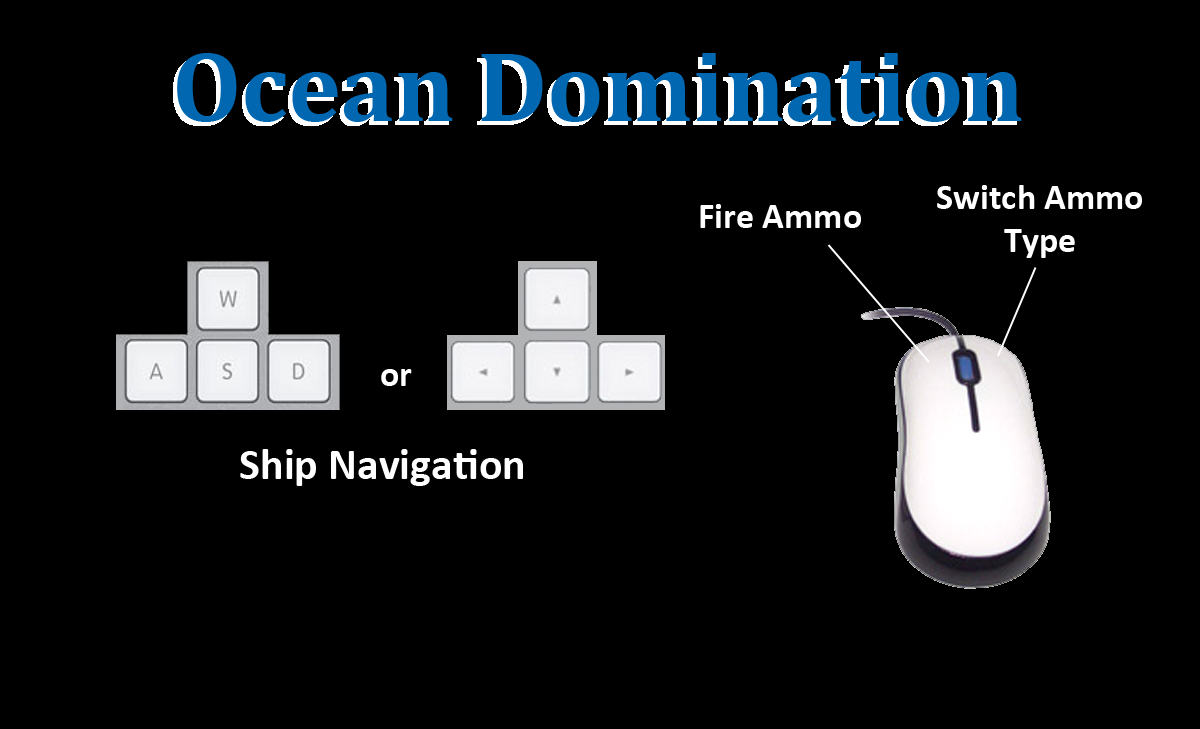
<style>
.page{position:relative;width:1200px;height:729px;background:#000000}
.page>*{position:absolute;margin:0}
.t1{font:36px "Calibri-Bold";color:#ffffff}
.t2{font:44px "Calibri-Bold";color:#ffffff}
</style>
<div class="page">
<p class="t1" style="left:937px;top:185px;width:205px;height:73px;text-align:center">Switch Ammo<br>Type</p>
<p class="t1" style="left:700px;top:204px;width:161px;height:24px">Fire Ammo</p>
<p class="t1" style="left:381px;top:369px;width:31px;height:17px">or</p>
<p class="t2" style="left:240px;top:449px;width:283px;height:37px">Ship Navigation</p>
</div>
